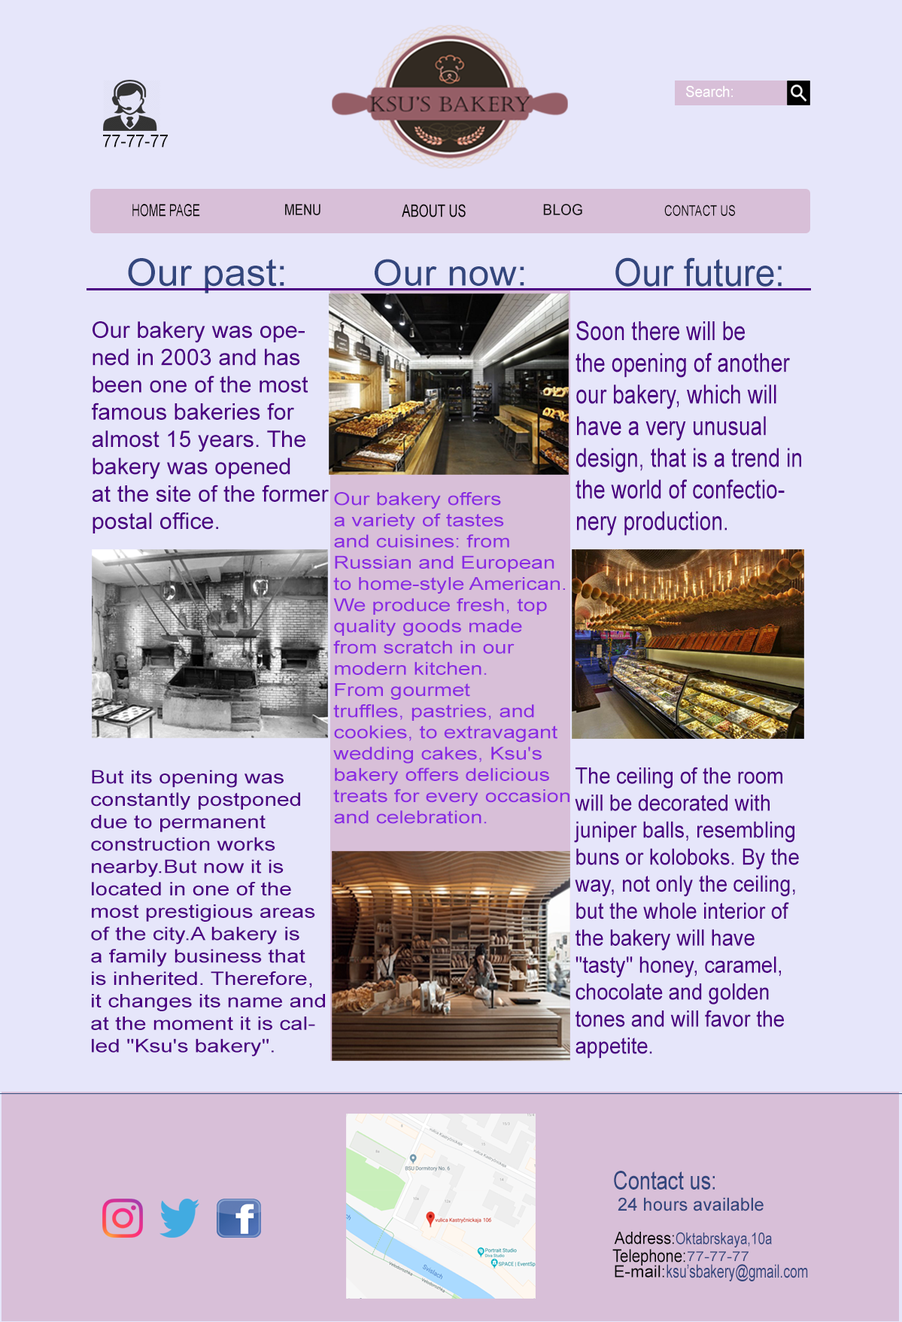
<style>
.page{position:relative;width:902px;height:1322px;background:#e6e6fa}
.page>*{position:absolute;margin:0}
.t1{font:15.1px "ArialMT";color:#ffffff;scale:0.94 1}
.t2{font:17.4px "ArialMT";color:#050505;scale:0.95 1}
.t3{font:16.7px "ArialMT";color:#050505;scale:0.69 1}
.t4{font:20.8px "ClarendonBT-Roman";color:#050505;scale:0.69 1}
.t5{font:15px "ArialMT";color:#121212;scale:0.83 1}
.t6{font:17.3px "ArialMT";color:#050505;scale:0.73 1}
.t7{font:15px "ArialMT";color:#171717;scale:0.97 1}
.t8{font:14.8px "ArialMT";color:#080808;scale:0.75 1}
.t9{font:38.7px "ArialMT";color:#33467d;scale:0.92 1}
.t10{font:38.1px "ArialMT";color:#33467d}
.t11{font:36.2px "ArialMT";color:#33467d;scale:1.05 1}
.t12{font:22.7px "ArialMT";color:#4b0082}
.t13{font:26.4px "ArialMT";color:#4b0082;scale:0.81 1}
.t14{font:17.7px "ArialMT";color:#8a2be2;scale:1.23 1}
.t15{font:18.7px "ArialMT";color:#4b0082;scale:1.2 1}
.t16{font:22.5px "ArialMT";color:#4b0082;scale:0.91 1}
.t17{font:25.7px "ArialMT";color:#33467d;scale:0.8 1}
.t18{font:18.1px "ArialMT";color:#33467d}
.t19{font:17px "ArialMT";color:#050505;scale:0.9 1}
.t20{font:16.2px "ArialMT";color:#33467d;scale:0.79 1}
.t21{font:17.6px "ArialMT";color:#050505;scale:0.86 1}
.t22{font:13.5px "ArialMT";color:#33467d;scale:1.16 1}
.t23{font:16.8px "ArialMT";color:#050505}
.t24{font:18.2px "ArialMT";color:#33467d;scale:0.72 1}
</style>
<div class="page">
<p class="t1" style="left:686px;top:86px;width:47px;height:11px">Search:</p>
<p class="t2" style="left:103px;top:135px;width:65px;height:12px">77-77-77</p>
<p class="t3" style="left:132px;top:204px;width:68px;height:13px"><span class="t4"> </span>HOME PAGE</p>
<p class="t5" style="left:285px;top:204px;width:36px;height:11px">MENU</p>
<p class="t6" style="left:402px;top:204px;width:64px;height:13px">ABOUT US</p>
<p class="t7" style="left:543px;top:204px;width:39px;height:11px">BLOG</p>
<p class="t8" style="left:664px;top:205px;width:71px;height:11px">CONTACT US</p>
<p class="t9" style="left:615px;top:257px;width:167px;height:30px">Our future:</p>
<p class="t10" style="left:128px;top:258px;width:156px;height:35px">Our past:</p>
<p class="t11" style="left:375px;top:259px;width:149px;height:27px">Our now:</p>
<p class="t12" style="left:92px;top:321px;width:237px;height:212px">Our bakery was ope-<br>ned in 2003 and has <br>been one of the most<br>famous bakeries for <br>almost 15 years. The <br>bakery was opened <br>at the site of the former<br>postal office.</p>
<p class="t13" style="left:576px;top:321px;width:225px;height:215px">Soon there will be<br>the opening of another <br>our bakery, which will <br>have a very unusual<br>design, that is a trend in<br>the world of confectio-<br>nery production.</p>
<p class="t14" style="left:333px;top:492px;width:237px;height:332px">Our bakery offers<br>a variety of tastes<br>and cuisines: from <br>Russian and European<br>to home-style American.<br>We produce fresh, top <br>quality goods made <br>from scratch in our <br>modern kitchen. <br>From gourmet<br>truffles, pastries, and <br>cookies, to extravagant <br>wedding cakes, Ksu's <br>bakery offers delicious <br>treats for every occasion<br>and celebration.</p>
<p class="t15" style="left:91px;top:770px;width:234px;height:286px">But its opening was <br>constantly postponed <br>due to permanent <br>construction works <br>nearby.But now it is <br>located in one of the <br>most prestigious areas<br>of the city.A bakery is <br>a family business that<br>is inherited. Therefore, <br>it changes its name and<br>at the moment it is cal-<br>led "Ksu's bakery".</p>
<p class="t16" style="left:574px;top:767px;width:225px;height:292px">The ceiling of the room<br>will be decorated with<br>juniper balls, resembling <br>buns or koloboks. By the <br>way, not only the ceiling, <br>but the whole interior of <br>the bakery will have <br>"tasty" honey, caramel, <br>chocolate and golden <br>tones and will favor the<br>appetite.</p>
<p class="t17" style="left:614px;top:1171px;width:101px;height:18px">Contact us:</p>
<p class="t18" style="left:618px;top:1197px;width:146px;height:14px">24 hours available</p>
<p class="t19" style="left:614px;top:1232px;width:60px;height:12px">Address:</p>
<p class="t20" style="left:676px;top:1232px;width:96px;height:15px">Oktabrskaya,10a</p>
<p class="t21" style="left:612px;top:1249px;width:73px;height:16px">Telephone:</p>
<p class="t22" style="left:688px;top:1251px;width:61px;height:10px">77-77-77</p>
<p class="t23" style="left:615px;top:1265px;width:49px;height:12px">E-mail:</p>
<p class="t24" style="left:667px;top:1264px;width:141px;height:17px">ksu’sbakery@gmail.com</p>
</div>
